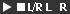
<style>
.page{position:relative;width:70px;height:14px;background:#333333}
.page>*{position:absolute;margin:0}
.t1{font:11px "Tahoma-Bold";letter-spacing:-0.14em;color:#ffffff}
.t2{font:10px "Tahoma-Bold";letter-spacing:-0.14em;color:#ffffff}
.t3{font:11px "Tahoma-Bold";letter-spacing:-0.14em;color:#ffffff;scale:0.9 1}
.t4{font:11px "Tahoma-Bold";letter-spacing:0.18em;color:#ffffff;scale:1.2 1}
.t5{font:11px "Tahoma-Bold";letter-spacing:0.18em;color:#ffffff}
</style>
<div class="page">
<p class="t1" style="left:28px;top:2px;width:14px;height:10px">L<span class="t2">/</span><span class="t3">R</span></p>
<p class="t4" style="left:46px;top:3px;width:21px;height:8px">L<span class="t5"> R</span></p>
</div>
